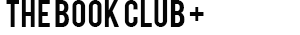
<style>
.page{position:relative;width:300px;height:35px;background:#ffffff}
.page>*{position:absolute;margin:0}
.t1{font:30px "Bebas";color:#040404}
</style>
<div class="page">
<p class="t1" style="left:6px;top:0px;width:198px;height:27px">THE BOOK CLUB +</p>
</div>
